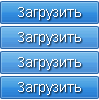
<style>
.page{position:relative;width:99px;height:100px}
.page>*{position:absolute;margin:0}
.t1{font:14px "ArialMT";color:#ffffff}
</style>
<div class="page">
<p class="t1" style="left:17px;top:5px;width:65px;height:17px">Загрузить</p>
<p class="t1" style="left:17px;top:30px;width:65px;height:17px">Загрузить</p>
<p class="t1" style="left:17px;top:55px;width:65px;height:17px">Загрузить</p>
<p class="t1" style="left:17px;top:80px;width:65px;height:17px">Загрузить</p>
</div>
